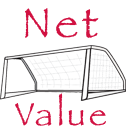
<style>
.page{position:relative;width:128px;height:128px;background:#ffffff}
.page>*{position:absolute;margin:0}
.t1{font:43.8px "Papyrus";letter-spacing:0.1em;color:#d11141}
.t2{font:33.5px "Papyrus";letter-spacing:0.1em;color:#d11141}
.t3{font:40.2px "Papyrus";letter-spacing:0.1em;color:#d11141}
</style>
<div class="page">
<p class="t1" style="left:25px;top:8px;width:74px;height:30px">Net</p>
<p class="t2" style="left:15px;top:93px;width:91px;height:33px"><span class="t3"> </span>Value</p>
</div>
